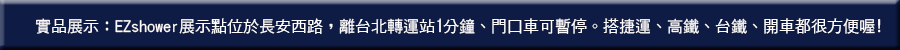
<style>
.page{position:relative;width:900px;height:50px;background:#0e1b44}
.page>*{position:absolute;margin:0}
.t1{font:16px "DFHei-Md-HK-BF";color:#fdfbfb}
</style>
<div class="page">
<p class="t1" style="left:35px;top:18px;width:846px;height:16px">實品展示：EZshower展示點位於長安西路，離台北轉運站1分鐘、門口車可暫停。搭捷運、高鐵、台鐵、開車都很方便喔!</p>
</div>
